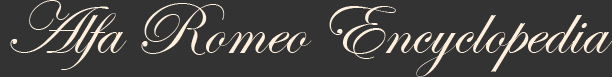
<style>
.page{position:relative;width:612px;height:77px;background:#333333}
.page>*{position:absolute;margin:0}
.t1{font:75px "EdwardianScriptITC";color:#ffefdd}
</style>
<div class="page">
<p class="t1" style="left:10px;top:0px;width:603px;height:77px">Alfa Romeo Encyclopedia</p>
</div>
